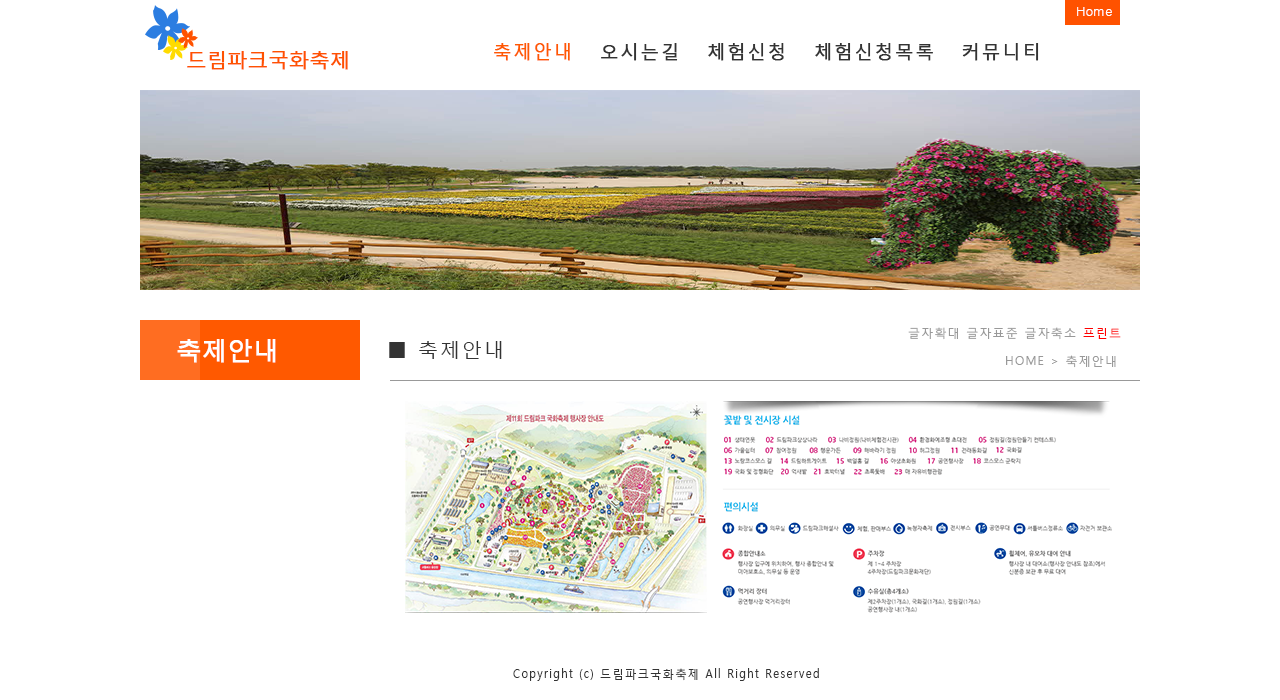
<style>
.page{position:relative;width:1280px;height:700px;background:#ffffff}
.page>*{position:absolute;margin:0}
.t1{font:13px "Dotum";color:#ffffff}
.t2{font:20px "MalgunGothicRegular";color:#ff5200;font-weight:bold}
.t3{font:18px "MalgunGothicRegular";letter-spacing:0.1em;color:#333333;font-weight:bold}
.t4{font:18px "MalgunGothicRegular";letter-spacing:0.1em;color:#ff5900;font-weight:bold}
.t5{font:12px "MalgunGothicRegular";letter-spacing:0.1em;color:#999999}
.t6{font:12px "MalgunGothicRegular";letter-spacing:0.1em;color:#ff0000}
.t7{font:25px "MalgunGothicRegular";color:#ffffff;font-weight:bold}
.t8{font:20px "MalgunGothicRegular";letter-spacing:0.1em;color:#333333}
.t9{font:12px "MalgunGothicRegular";letter-spacing:0.1em;color:#333333;scale:0.95 1}
</style>
<div class="page">
<p class="t1" style="left:1077px;top:7px;width:35px;height:9px">Home</p>
<p class="t2" style="left:187px;top:51px;width:161px;height:19px">드림파크국화축제</p>
<p class="t3" style="left:494px;top:43px;width:545px;height:18px"><span class="t4">축제안내</span>   오시는길   체험신청   체험신청목록   커뮤니티</p>
<p class="t5" style="left:908px;top:327px;width:213px;height:13px">글자확대 글자표준 글자축소 <span class="t6">프린트</span></p>
<p class="t7" style="left:177px;top:339px;width:99px;height:24px">축제안내</p>
<p class="t8" style="left:389px;top:341px;width:113px;height:18px">■ 축제안내</p>
<p class="t5" style="left:1006px;top:355px;width:110px;height:13px">HOME &gt; 축제안내</p>
<p class="t9" style="left:513px;top:668px;width:306px;height:13px">Copyright (c) 드림파크국화축제 All Right Reserved</p>
</div>
